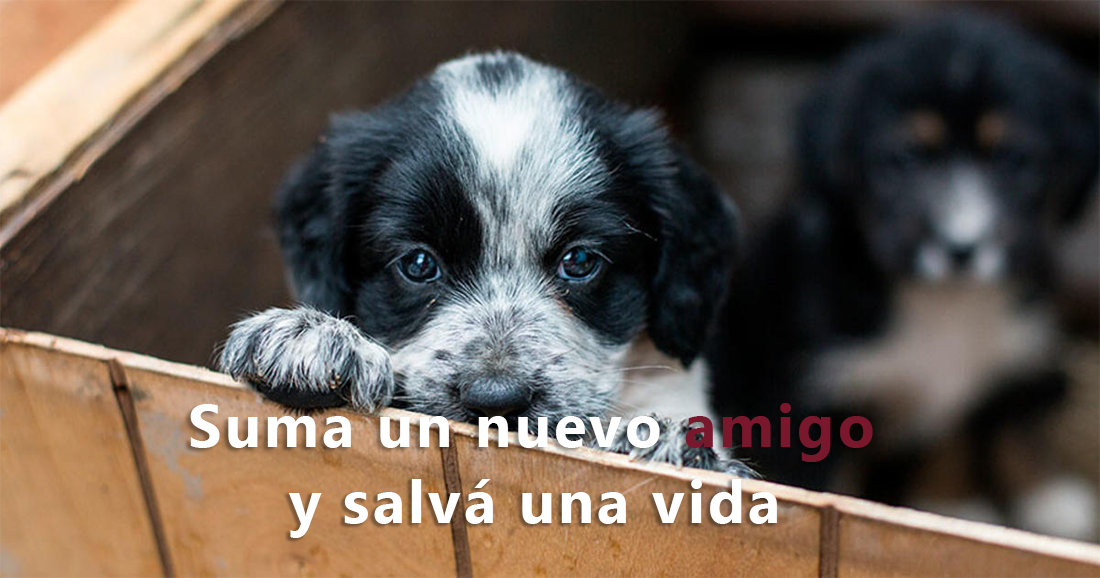
<style>
.page{position:relative;width:1100px;height:578px}
.page>*{position:absolute;margin:0}
.t1{font:60px "MicrosoftTaiLe-Bold";letter-spacing:0.05em;color:#ffffff}
.t2{font:60px "MicrosoftTaiLe-Bold";letter-spacing:0.05em;color:#79182d}
</style>
<div class="page">
<p class="t1" style="left:190px;top:403px;width:683px;height:59px">Suma un nuevo <span class="t2">amigo</span></p>
<p class="t1" style="left:289px;top:479px;width:488px;height:59px">y salvá una vida</p>
</div>
